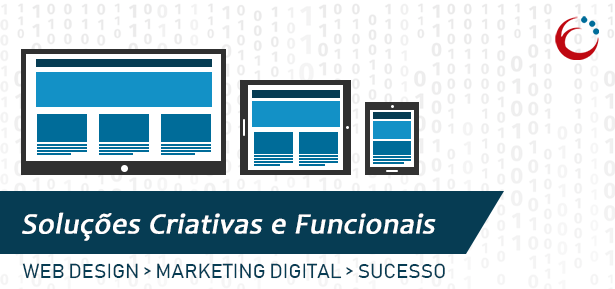
<style>
.page{position:relative;width:615px;height:289px;background:#ffffff}
.page>*{position:absolute;margin:0}
.t1{font:29.2px "Candara";letter-spacing:0.01em;color:#ffffff;font-weight:bold;font-style:italic}
.t2{font:20px "Bahnschrift-SemiLight";letter-spacing:0.01em;color:#063c53;font-weight:bold;font-style:italic}
</style>
<div class="page">
<p class="t1" style="left:22px;top:212px;width:414px;height:29px">Soluções Criativas e Funcionais</p>
<p class="t2" style="left:22px;top:263px;width:423px;height:16px">WEB DESIGN &gt; MARKETING DIGITAL &gt; SUCESSO</p>
</div>
